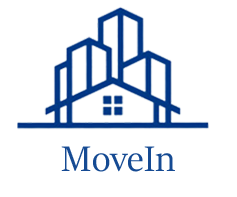
<style>
.page{position:relative;width:237px;height:197px;background:#ffffff}
.page>*{position:absolute;margin:0}
.t1{font:40px "SitkaBanner";letter-spacing:0.005em;color:#154a93}
</style>
<div class="page">
<p class="t1" style="left:61px;top:146px;width:114px;height:26px">MoveIn</p>
</div>
